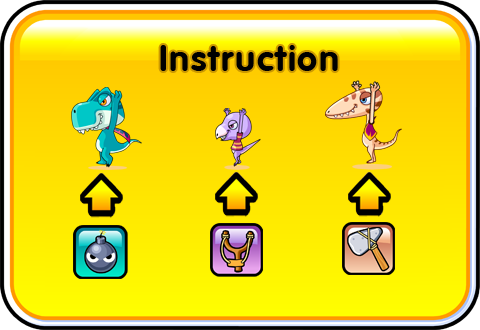
<style>
.page{position:relative;width:480px;height:330px}
.page>*{position:absolute;margin:0}
.t1{font:36px "VNI-Vari";letter-spacing:0.04em;color:#000000}
</style>
<div class="page">
<p class="t1" style="left:160px;top:45px;width:178px;height:26px">Instruction</p>
</div>
